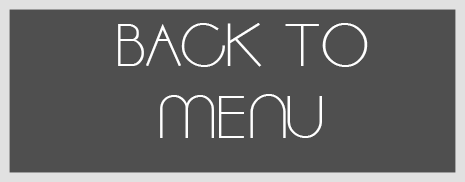
<style>
.page{position:relative;width:465px;height:182px;background:#4f4f4f}
.page>*{position:absolute;margin:0}
.t1{font:60px "Moonbeam";color:#ffffff}
</style>
<div class="page">
<p class="t1" style="left:118px;top:23px;width:250px;height:115px;text-align:center">BACK TO <br>MENU</p>
</div>
